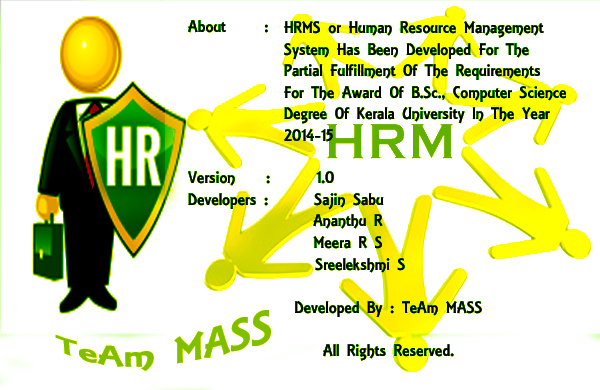
<style>
.page{position:relative;width:600px;height:390px;background:#ffffff}
.page>*{position:absolute;margin:0}
.t1{font:18px "ARESSENCE";color:#000000}
.t2{font:48px "ARESSENCE";color:#7ebf00}
</style>
<div class="page">
<p class="t1" style="left:188px;top:20px;width:294px;height:341px">About     :           <br><br><br><br><br><br><br>Version    :      1.0<br>Developers :      Sajin Sabu<br>Ananthu R                           <br>Meera R S                           <br>Sreelekshmi S                        <br><br>Developed By : TeAm MASS<br><br>All Rights Reserved.</p>
<p class="t1" style="left:284px;top:21px;width:282px;height:121px">HRMS or Human Resource Management                  System Has Been Developed For The <br>Partial Fulfillment Of The Requirements <br>For The Award Of B.Sc., Computer Science<br>Degree Of Kerala University In The Year 2014-15</p>
<p class="t2" style="left:55px;top:310px;width:216px;height:61px">TeAm MASS</p>
</div>
